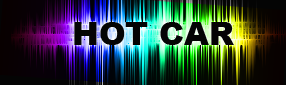
<style>
.page{position:relative;width:286px;height:85px}
.page>*{position:absolute;margin:0}
.t1{font:32px "Arial-Black";color:#040404}
</style>
<div class="page">
<p class="t1" style="left:74px;top:22px;width:160px;height:23px">HOT CAR</p>
</div>
